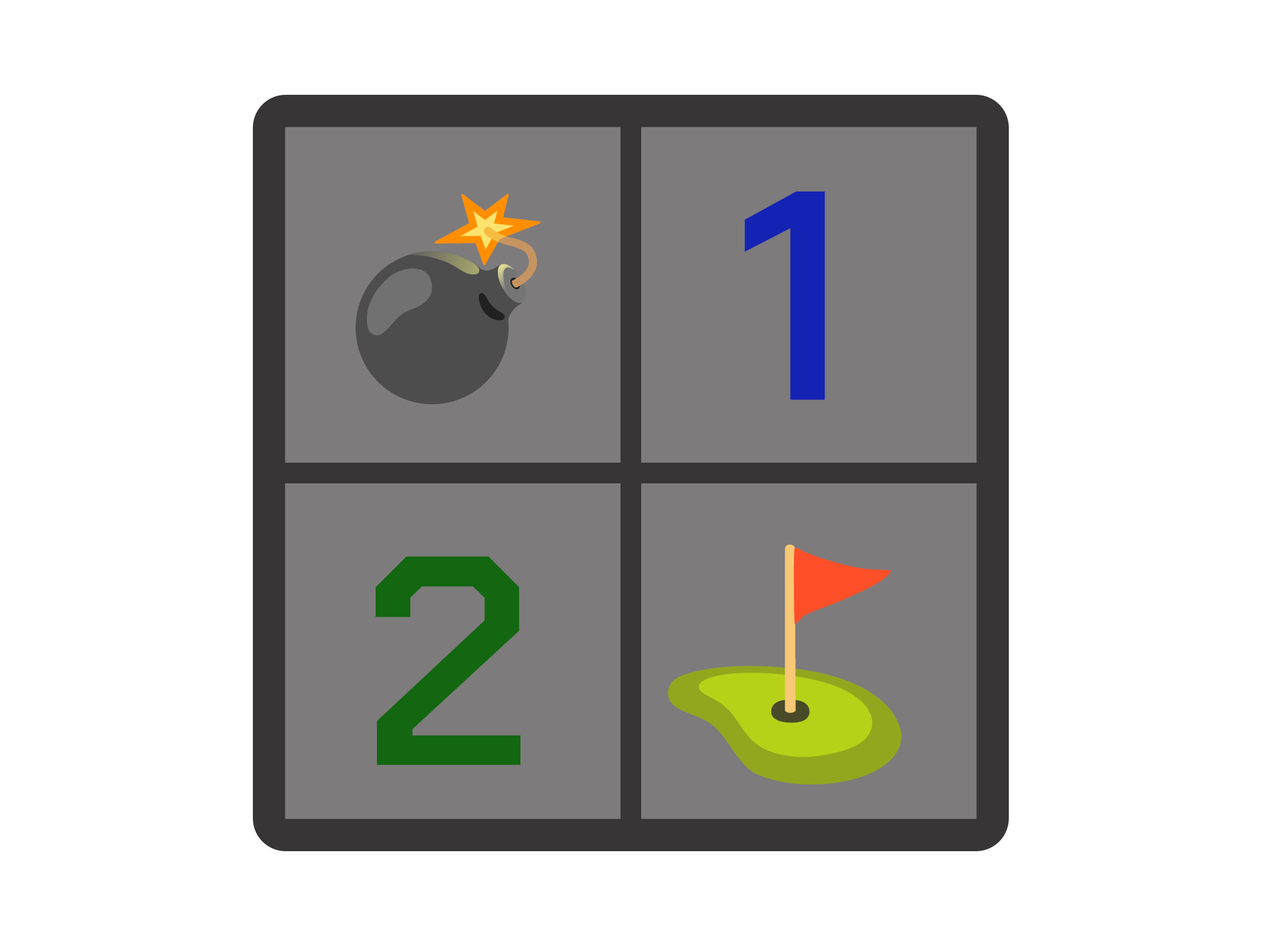
<style>
.page{position:relative;width:1261px;height:946px;background:#ffffff}
.page>*{position:absolute;margin:0}
.t1{font:297.3px "ChakraPetch-SemiBold";color:#1423b4}
.t2{font:297.3px "ChakraPetch-SemiBold";color:#126710}
</style>
<div class="page">
<p class="t1" style="left:745px;top:191px;width:80px;height:209px">1</p>
<p class="t2" style="left:376px;top:556px;width:144px;height:209px">2</p>
</div>
